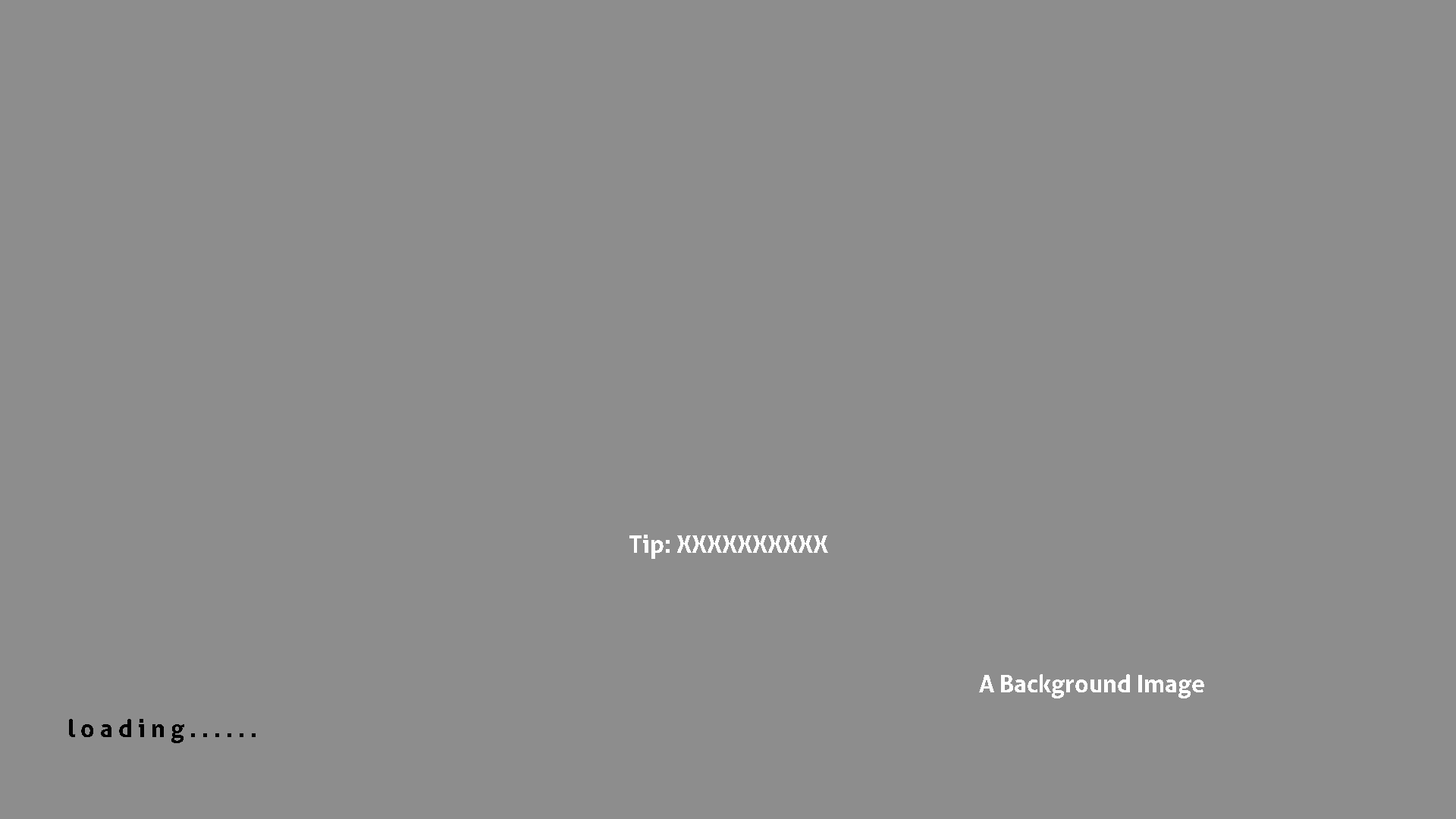
<style>
.page{position:relative;width:1456px;height:819px;background:#8d8d8d}
.page>*{position:absolute;margin:0}
.t1{font:24.3px "Aller-Bold";color:#ffffff}
.t2{font:24.3px "Aller-Bold";color:#010101}
</style>
<div class="page">
<p class="t1" style="left:629px;top:535px;width:199px;height:24px">Tip: XXXXXXXXXX</p>
<p class="t1" style="left:979px;top:674px;width:225px;height:24px">A Background Image</p>
<p class="t2" style="left:69px;top:719px;width:187px;height:24px">l o a d i n g . . . . . .</p>
</div>
